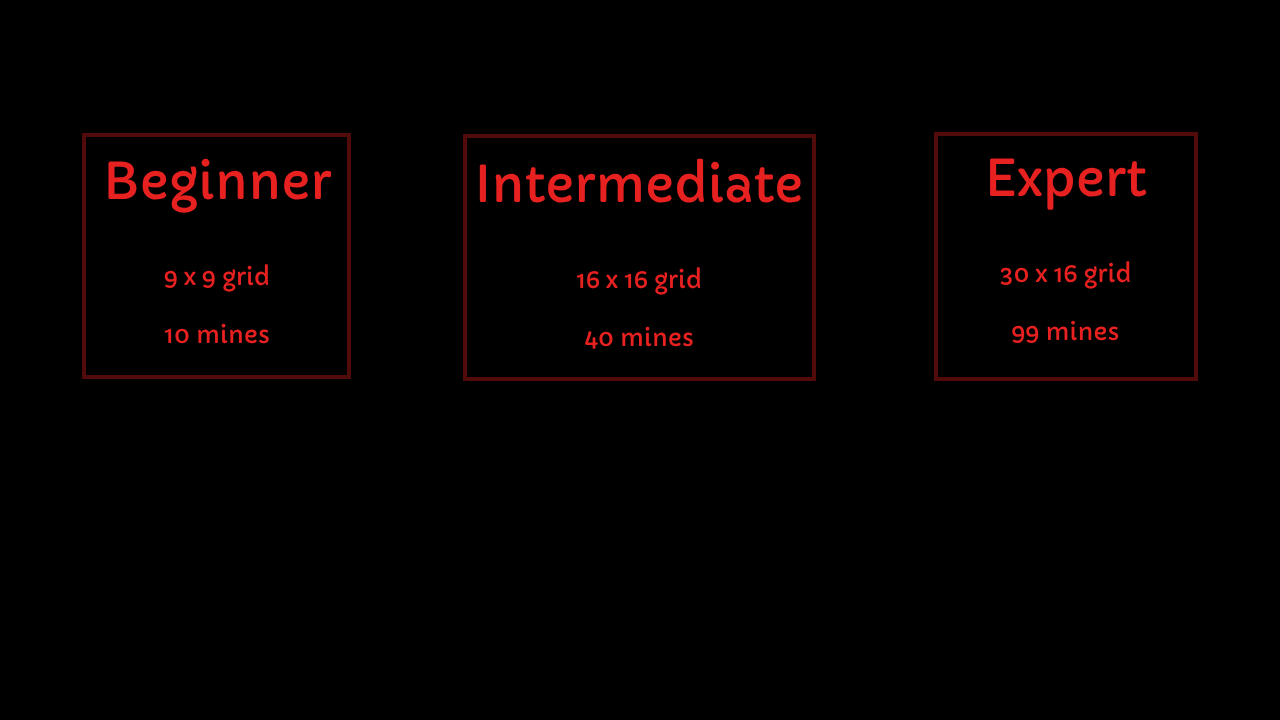
<style>
.page{position:relative;width:1280px;height:720px;background:#000000}
.page>*{position:absolute;margin:0}
.t1{font:24px "Capriola-Regular";color:#e72020}
.t2{font:50px "Capriola-Regular";color:#e72020}
</style>
<div class="page">
<p class="t1" style="left:108px;top:158px;width:224px;height:186px;text-align:center"><span class="t2">Beginner<br><br><br></span>9 x 9 grid<br><br>10 mines</p>
<p class="t1" style="left:479px;top:158px;width:322px;height:191px;text-align:center"><span class="t2">Intermediate<br><br><br></span>16 x 16 grid<br><br>40 mines</p>
<p class="t1" style="left:990px;top:158px;width:157px;height:186px;text-align:center"><span class="t2">Expert<br><br><br></span>30 x 16 grid<br><br>99 mines</p>
</div>
